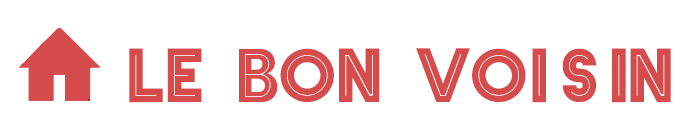
<style>
.page{position:relative;width:700px;height:131px;background:#ffffff}
.page>*{position:absolute;margin:0}
.t1{font:66.7px "Empire-Bold";color:#d64c4c}
</style>
<div class="page">
<p class="t1" style="left:129px;top:48px;width:542px;height:55px">le bon voisin</p>
</div>
